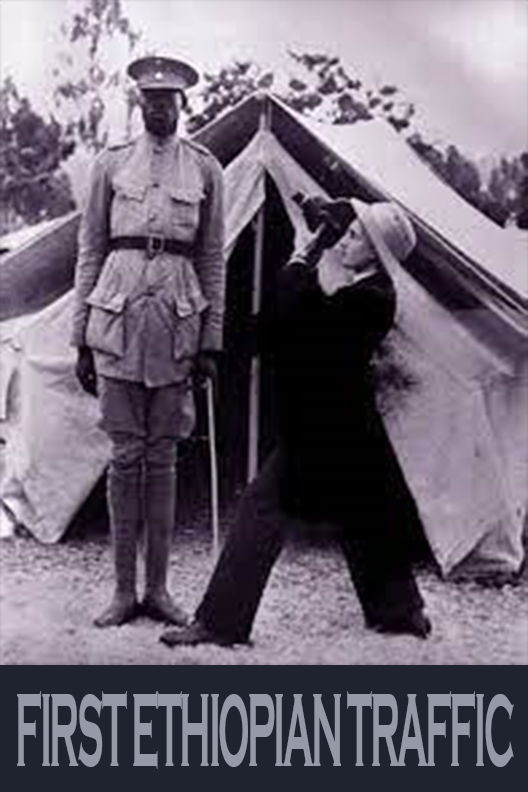
<style>
.page{position:relative;width:528px;height:792px}
.page>*{position:absolute;margin:0}
.t1{font:105.7px "CopperplateGothic-Bold";letter-spacing:-0.06em;color:#9699a8;text-transform:uppercase;scale:0.35 1}
</style>
<div class="page">
<p class="t1" style="left:17px;top:691px;width:497px;height:78px">FIRST ETHIOPIAN TRAFFIC</p>
</div>
